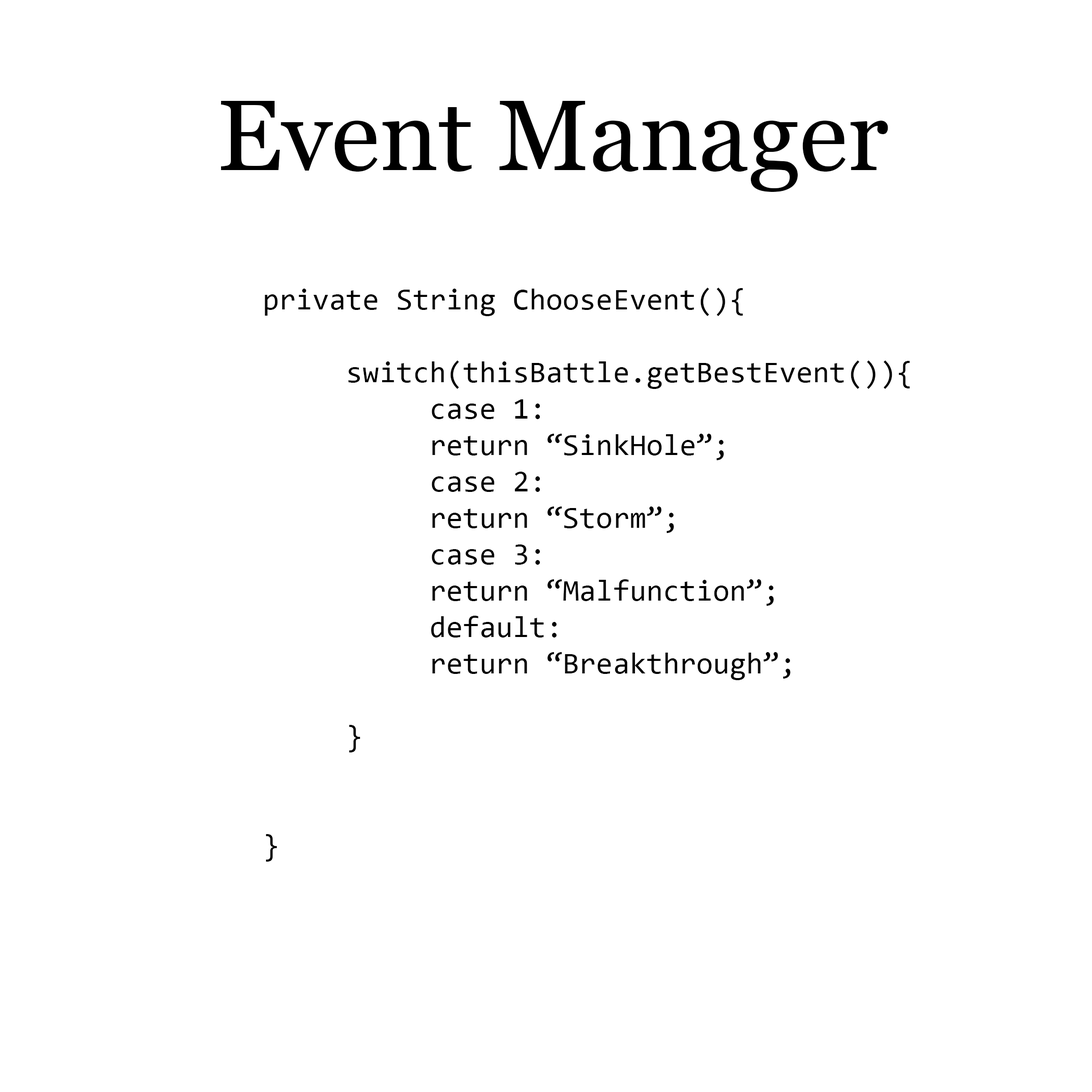
<style>
.page{position:relative;width:1092px;height:1092px;background:#ffffff}
.page>*{position:absolute;margin:0}
.t1{font:99.7px "Georgia";color:#000000}
.t2{font:30.3px "Consolas";color:#000000}
</style>
<div class="page">
<p class="t1" style="left:221px;top:101px;width:667px;height:91px">Event Manager</p>
<p class="t2" style="left:265px;top:288px;width:645px;height:574px">private String ChooseEvent(){<br>     <br>     switch(thisBattle.getBestEvent()){<br>          case 1:<br>          return “SinkHole”;<br>          case 2:<br>          return “Storm”;<br>          case 3: <br>          return “Malfunction”;<br>          default:<br>          return “Breakthrough”; <br>          <br>     }<br><br><br>}</p>
</div>
